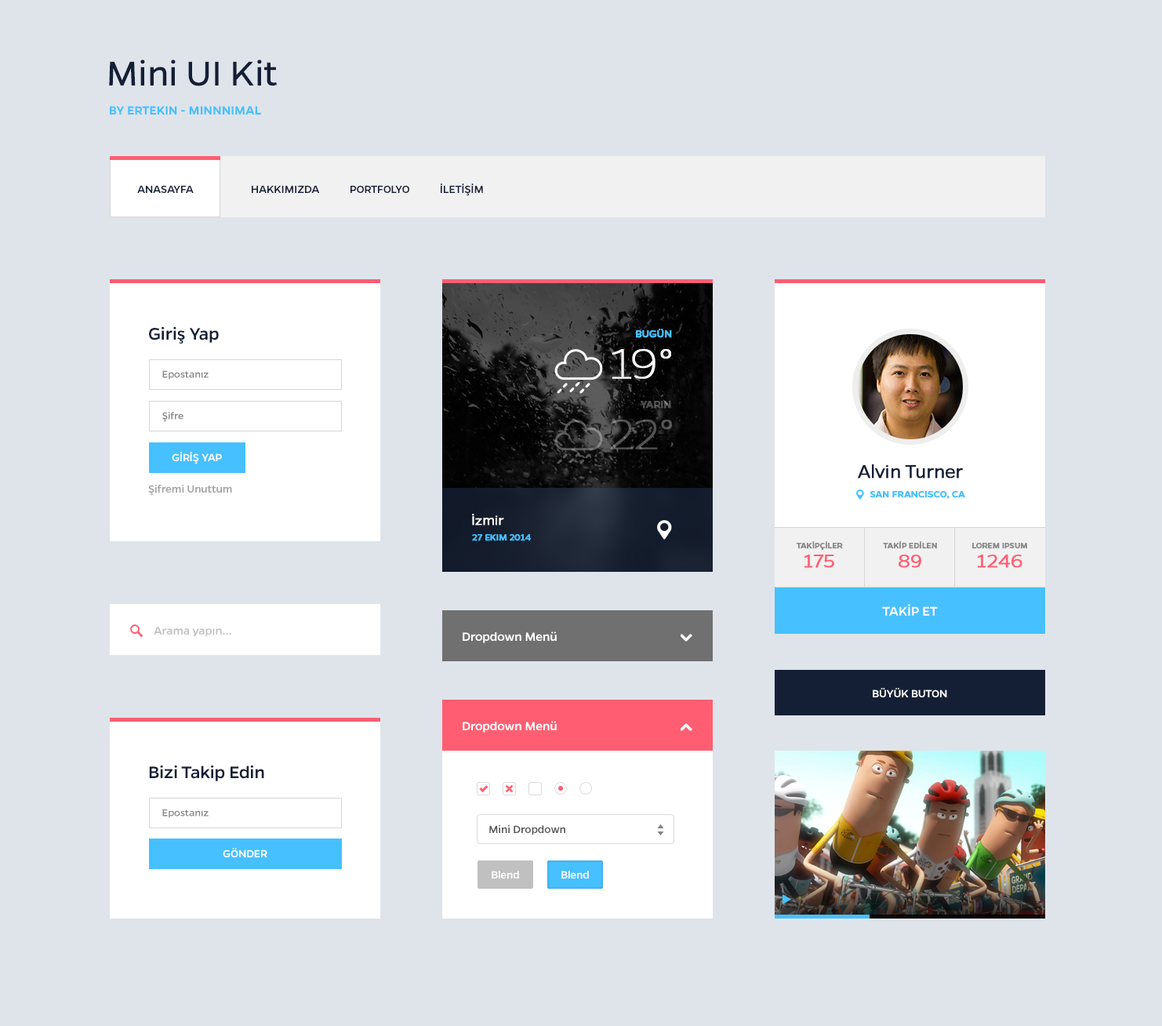
<style>
.page{position:relative;width:1162px;height:1026px;background:#dfe4eb}
.page>*{position:absolute;margin:0}
.t1{font:38.9px "Gentona-Book";color:#141f36}
.t2{font:13.3px "Gentona-SemiBold";color:#46c0ff}
.t3{font:11.8px "Gentona-Medium";color:#141f37}
.t4{font:18.8px "Gentona-Medium";color:#141f36}
.t5{font:11px "Gentona-Medium";color:#46c0ff;font-weight:bold}
.t6{font:47.1px "Gentona-Thin";color:#ffffff;font-weight:bold}
.t7{font:11px "Gentona-Medium";color:#8a8a8a}
.t8{font:11px "Gentona-Medium";color:#515151;font-weight:bold}
.t9{font:47.1px "Gentona-Thin";color:#535353;font-weight:bold}
.t10{font:11.8px "Gentona-Medium";color:#ffffff}
.t11{font:19.6px "Gentona-Light";color:#131f36;font-weight:bold}
.t12{font:11.8px "Gentona-Medium";color:#a3a3a3}
.t13{font:10.2px "Gentona-Medium";color:#46c0ff;font-weight:bold}
.t14{font:14.1px "Gentona-Light";color:#ffffff;font-weight:bold}
.t15{font:9.4px "Gentona-Medium";color:#46c0ff;font-weight:bold}
.t16{font:8.6px "Gentona-Medium";color:#898989;font-weight:bold}
.t17{font:20.6px "Gentona-Light";color:#ff5e72;font-weight:bold}
.t18{font:14.1px "Gentona-Medium";color:#ffffff}
.t19{font:12.5px "Gentona-Medium";color:#c1c1c1}
.t20{font:13.3px "Gentona-Medium";color:#ffffff}
.t21{font:11.8px "Gentona-Medium";color:#4a4a4a}
</style>
<div class="page">
<p class="t1" style="left:109px;top:60px;width:168px;height:26px">Mini UI Kit</p>
<p class="t2" style="left:110px;top:106px;width:151px;height:9px">BY ERTEKIN - MINNNIMAL</p>
<p class="t3" style="left:137px;top:185px;width:57px;height:8px">ANASAYFA</p>
<p class="t3" style="left:252px;top:185px;width:68px;height:8px">HAKKIMIZDA</p>
<p class="t3" style="left:351px;top:185px;width:58px;height:8px">PORTFOLYO</p>
<p class="t3" style="left:441px;top:184px;width:42px;height:12px">İLETİŞİM</p>
<p class="t4" style="left:149px;top:326px;width:70px;height:18px">Giriş Yap</p>
<p class="t5" style="left:636px;top:329px;width:36px;height:9px">BUGÜN</p>
<p class="t6" style="left:612px;top:349px;width:59px;height:30px">19°</p>
<p class="t7" style="left:162px;top:370px;width:47px;height:10px">Epostanız</p>
<p class="t8" style="left:640px;top:401px;width:31px;height:8px">YARIN</p>
<p class="t7" style="left:162px;top:412px;width:22px;height:10px">Şifre</p>
<p class="t9" style="left:610px;top:420px;width:62px;height:29px">22°</p>
<p class="t10" style="left:172px;top:452px;width:50px;height:12px">GİRİŞ YAP</p>
<p class="t11" style="left:858px;top:464px;width:105px;height:14px">Alvin Turner</p>
<p class="t12" style="left:148px;top:485px;width:84px;height:11px">Şifremi Unuttum</p>
<p class="t13" style="left:870px;top:491px;width:95px;height:8px">SAN FRANCISCO, CA</p>
<p class="t14" style="left:472px;top:514px;width:32px;height:11px">İzmir</p>
<p class="t15" style="left:472px;top:534px;width:60px;height:7px">27 EKIM 2014</p>
<p class="t16" style="left:796px;top:541px;width:47px;height:10px">TAKİPÇİLER</p>
<p class="t16" style="left:883px;top:541px;width:54px;height:8px">TAKİP EDİLEN</p>
<p class="t16" style="left:973px;top:543px;width:54px;height:6px">LOREM IPSUM</p>
<p class="t17" style="left:805px;top:555px;width:30px;height:13px">175</p>
<p class="t17" style="left:899px;top:555px;width:23px;height:13px">89</p>
<p class="t17" style="left:978px;top:555px;width:45px;height:13px">1246</p>
<p class="t18" style="left:882px;top:604px;width:56px;height:12px">TAKİP ET</p>
<p class="t19" style="left:154px;top:627px;width:77px;height:10px">Arama yapın...</p>
<p class="t20" style="left:463px;top:631px;width:94px;height:12px">Dropdown Menü</p>
<p class="t10" style="left:873px;top:688px;width:74px;height:9px">BÜYÜK BUTON</p>
<p class="t20" style="left:463px;top:721px;width:94px;height:12px">Dropdown Menü</p>
<p class="t4" style="left:149px;top:765px;width:115px;height:16px">Bizi Takip Edin</p>
<p class="t7" style="left:162px;top:809px;width:47px;height:9px">Epostanız</p>
<p class="t21" style="left:489px;top:825px;width:76px;height:10px">Mini Dropdown</p>
<p class="t10" style="left:223px;top:848px;width:44px;height:9px">GÖNDER</p>
<p class="t10" style="left:492px;top:871px;width:27px;height:7px">Blend</p>
<p class="t10" style="left:562px;top:871px;width:27px;height:7px">Blend</p>
</div>
